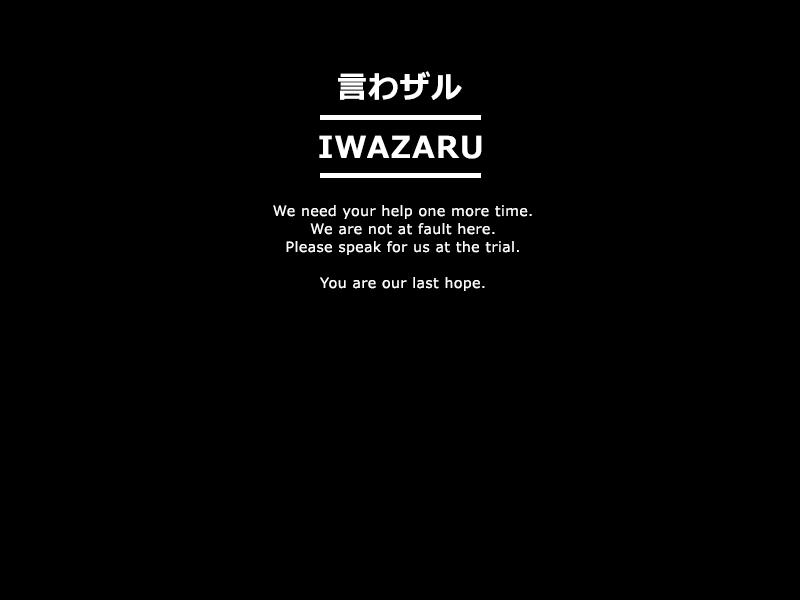
<style>
.page{position:relative;width:800px;height:600px;background:#000000}
.page>*{position:absolute;margin:0}
.t1{font:30px "Meiryo-Bold";letter-spacing:0.05em;color:#ffffff}
.t2{font:14px/18px "Meiryo";letter-spacing:0.05em;color:#ffffff}
</style>
<div class="page">
<p class="t1" style="left:338px;top:71px;width:124px;height:29px">言わザル</p>
<p class="t1" style="left:319px;top:135px;width:163px;height:24px">IWAZARU</p>
<p class="t2" style="left:273px;top:205px;width:259px;height:86px;text-align:center">We need your help one more time.<br>We are not at fault here.<br>Please speak for us at the trial.<br><br>You are our last hope.</p>
</div>
